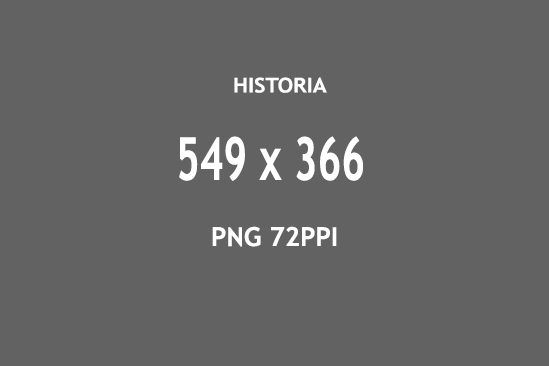
<style>
.page{position:relative;width:549px;height:366px;background:#626262}
.page>*{position:absolute;margin:0}
.t1{font:20.4px "TrebuchetMS-Bold";color:#ffffff;scale:1.08 1}
.t2{font:59.4px "TrebuchetMS-Bold";color:#ffffff;scale:0.68 1}
.t3{font:26.2px "TrebuchetMS-Bold";color:#ffffff}
</style>
<div class="page">
<p class="t1" style="left:234px;top:77px;width:93px;height:16px">HISTORIA</p>
<p class="t2" style="left:179px;top:136px;width:184px;height:45px">549 x 366</p>
<p class="t3" style="left:212px;top:226px;width:125px;height:21px">PNG 72PPI</p>
</div>
